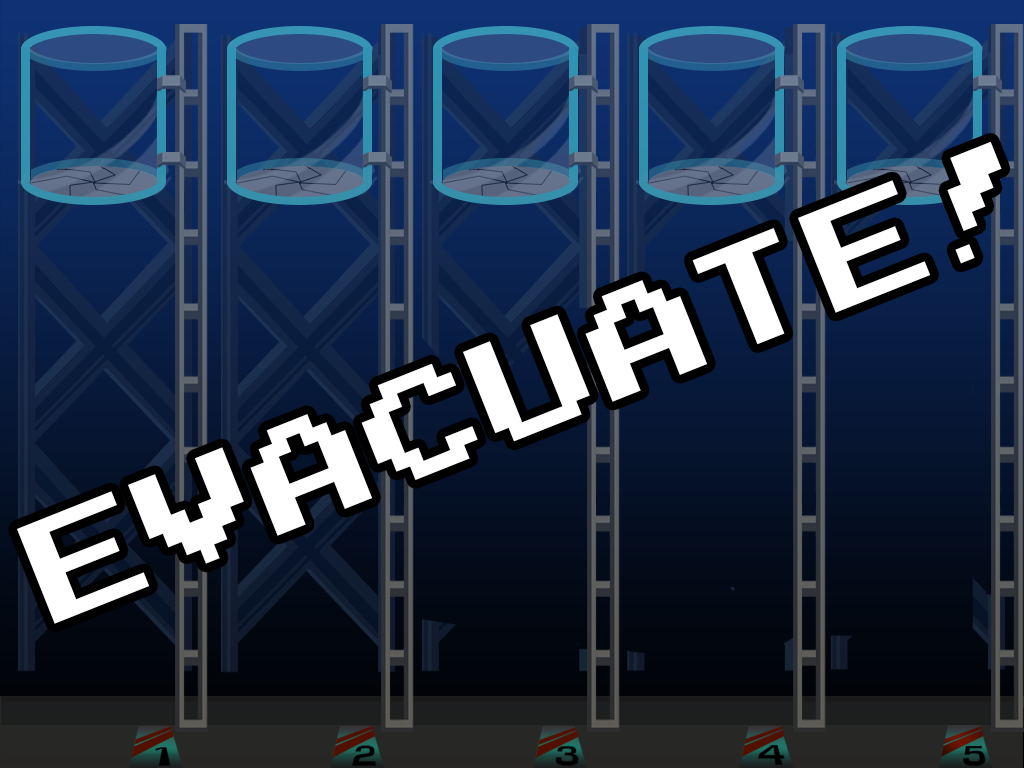
<style>
.page{position:relative;width:1024px;height:768px}
.page>*{position:absolute;margin:0}
.t1{font:145.1px "JoystixMonospace-Regular";color:#ffffff}
</style>
<div class="page">
<p class="t1" style="left:17px;top:141px;width:985px;height:483px;rotate:-22deg">evacuate!</p>
</div>
